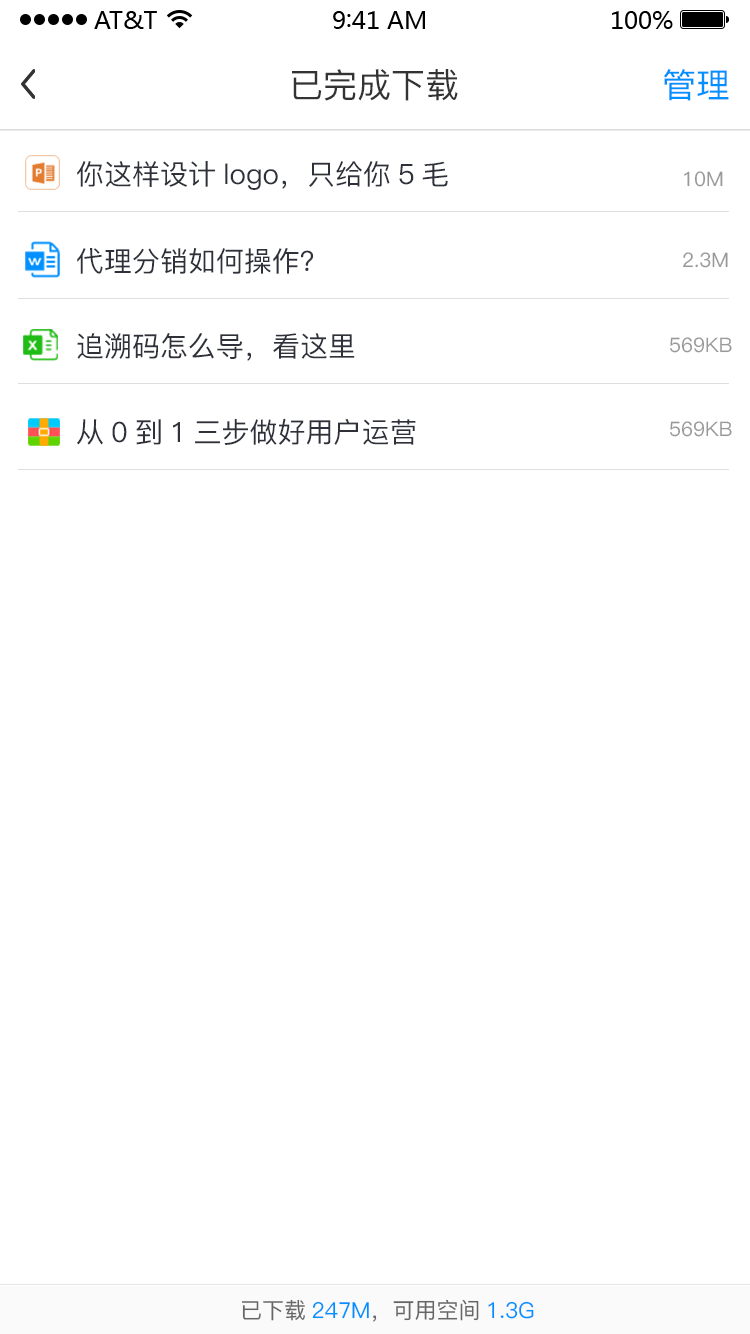
<style>
.page{position:relative;width:750px;height:1334px;background:#ffffff}
.page>*{position:absolute;margin:0}
.t1{font:34px "PingFang-SC-Medium";color:#333333}
.t2{font:34px "PingFang-SC-Medium";color:#0090ff}
.t3{font:28px "PingFang-SC-Medium";color:#2e313a}
.t4{font:20px "PingFang-SC-Medium";color:#999999}
.t5{font:22px "PingFang-SC-Medium";color:#666666}
.t6{font:22px "PingFang-SC-Medium";color:#0090ff}
</style>
<div class="page">
<p class="t1" style="left:292px;top:69px;width:166px;height:32px">已完成下载</p>
<p class="t2" style="left:663px;top:69px;width:66px;height:32px">管理</p>
<p class="t3" style="left:77px;top:161px;width:371px;height:29px">你这样设计logo，只给你5毛</p>
<p class="t4" style="left:684px;top:171px;width:39px;height:16px">10M</p>
<p class="t3" style="left:77px;top:248px;width:237px;height:26px">代理分销如何操作？</p>
<p class="t4" style="left:683px;top:252px;width:45px;height:16px">2.3M</p>
<p class="t3" style="left:77px;top:333px;width:278px;height:28px">追溯码怎么导，看这里</p>
<p class="t4" style="left:670px;top:337px;width:62px;height:16px">569KB</p>
<p class="t3" style="left:77px;top:418px;width:339px;height:27px">从0到1三步做好用户运营</p>
<p class="t4" style="left:670px;top:421px;width:62px;height:16px">569KB</p>
<p class="t5" style="left:242px;top:1299px;width:292px;height:23px">已下载<span class="t6">247M</span>，可用空间<span class="t6">1.3G</span></p>
</div>
